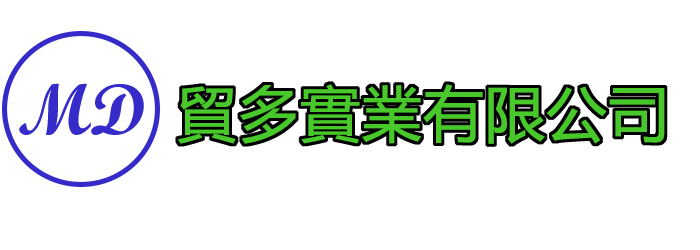
<style>
.page{position:relative;width:700px;height:250px;background:#ffffff}
.page>*{position:absolute;margin:0}
.t1{font:72px "ScriptMTBold";color:#352bc8}
.t2{font:60px "MicrosoftYaHei";color:#49c82b;font-weight:bold}
</style>
<div class="page">
<p class="t1" style="left:19px;top:83px;width:125px;height:52px">MD</p>
<p class="t2" style="left:178px;top:84px;width:487px;height:60px">貿多實業有限公司</p>
</div>
